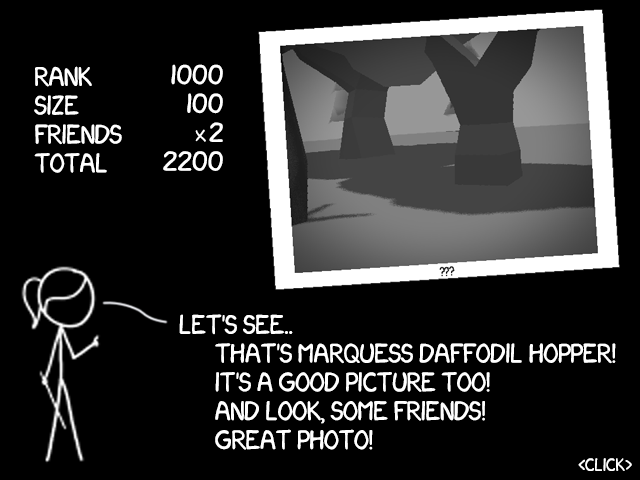
<style>
.page{position:relative;width:640px;height:480px;background:#000000}
.page>*{position:absolute;margin:0}
.t1{font:24px "xkcd-Regular";color:#ffffff}
.t2{font:24px "xkcd-Regular";color:#ffffff;text-transform:uppercase}
.t3{font:16px "xkcd-Regular";color:#ffffff;text-transform:uppercase}
</style>
<div class="page">
<p class="t1" style="left:163px;top:64px;width:60px;height:107px;text-align:right">1000<br>100<br>x2<br>2200</p>
<p class="t2" style="left:34px;top:66px;width:88px;height:107px">Rank<br>Size<br>Friends<br>Total</p>
<p class="t2" style="left:179px;top:314px;width:437px;height:136px">Let's see..<br> That's Marquess Daffodil Hopper!<br> It's a good picture too!<br> And look, some friends!<br> Great photo!</p>
<p class="t3" style="left:578px;top:458px;width:54px;height:13px">&lt;click&gt;</p>
</div>
